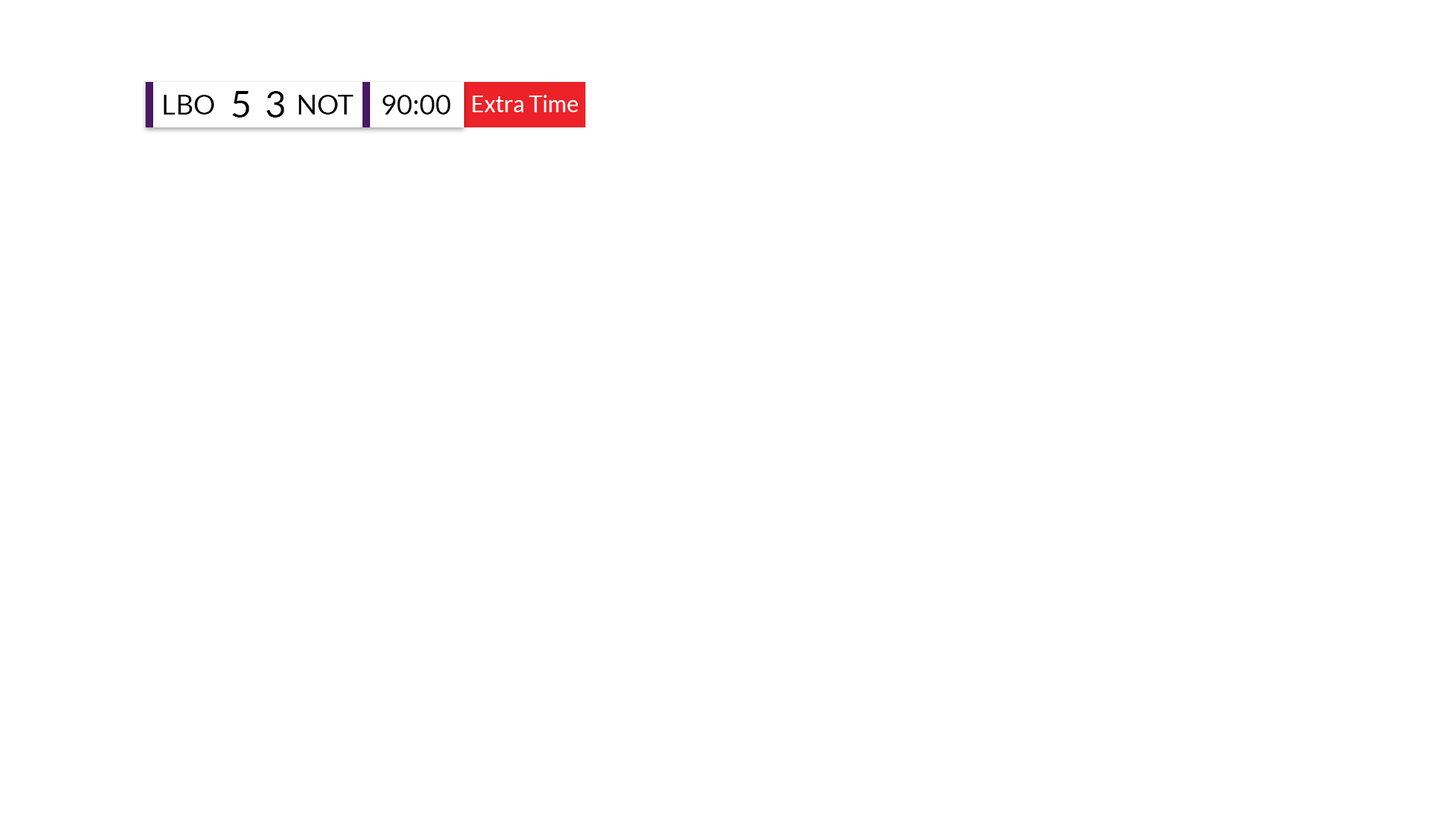
<style>
.page{position:relative;width:1456px;height:819px;background:#ffffff}
.page>*{position:absolute;margin:0}
.t1{font:27.3px "Lato-Regular";color:#000000}
.t2{font:36.4px "Lato-Regular";color:#000000}
.t3{font:22.7px "Lato-Regular";color:#ffffff}
</style>
<div class="page">
<p class="t1" style="left:164px;top:95px;width:51px;height:20px">LBO</p>
<p class="t2" style="left:232px;top:91px;width:17px;height:27px">5</p>
<p class="t2" style="left:266px;top:91px;width:18px;height:27px">3</p>
<p class="t1" style="left:299px;top:95px;width:54px;height:20px">NOT</p>
<p class="t1" style="left:382px;top:95px;width:68px;height:20px">90:00</p>
<p class="t3" style="left:472px;top:95px;width:106px;height:17px">Extra Time</p>
</div>
